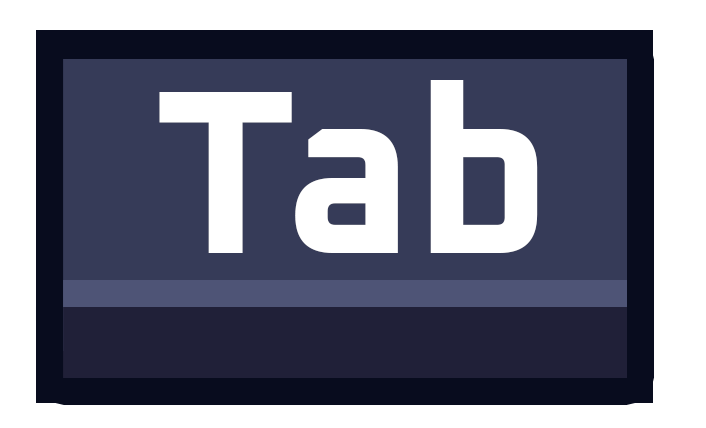
<style>
.page{position:relative;width:706px;height:428px;background:#ffffff}
.page>*{position:absolute;margin:0}
.t1{font:234.3px "Oxanium-Bold";color:#ffffff}
</style>
<div class="page">
<p class="t1" style="left:159px;top:80px;width:379px;height:173px">Tab</p>
</div>
